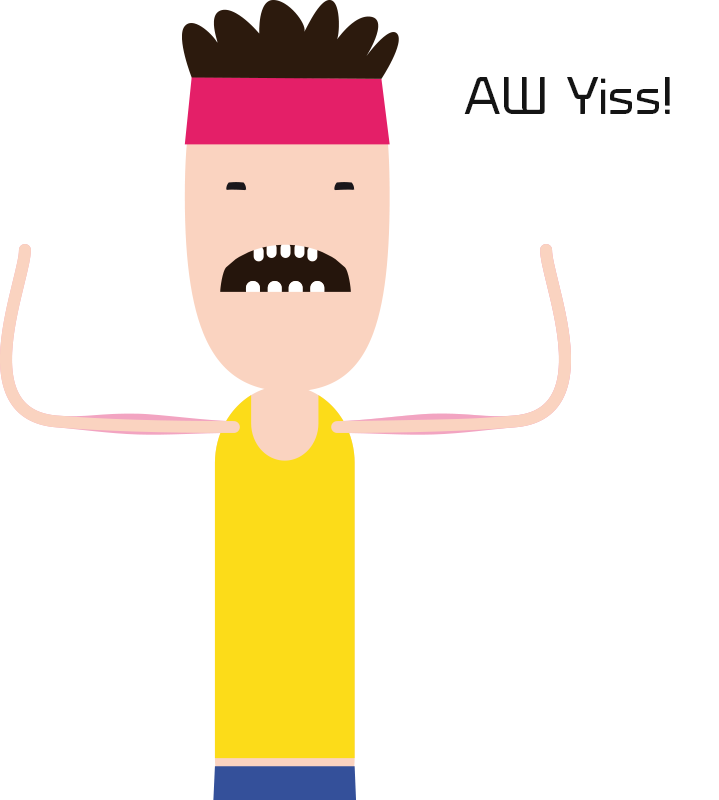
<style>
.page{position:relative;width:719px;height:800px;background:#ffffff}
.page>*{position:absolute;margin:0}
.t1{font:49.2px "Prime-Regular";color:#141414}
</style>
<div class="page">
<p class="t1" style="left:464px;top:77px;width:206px;height:37px">AW Yiss!</p>
</div>
